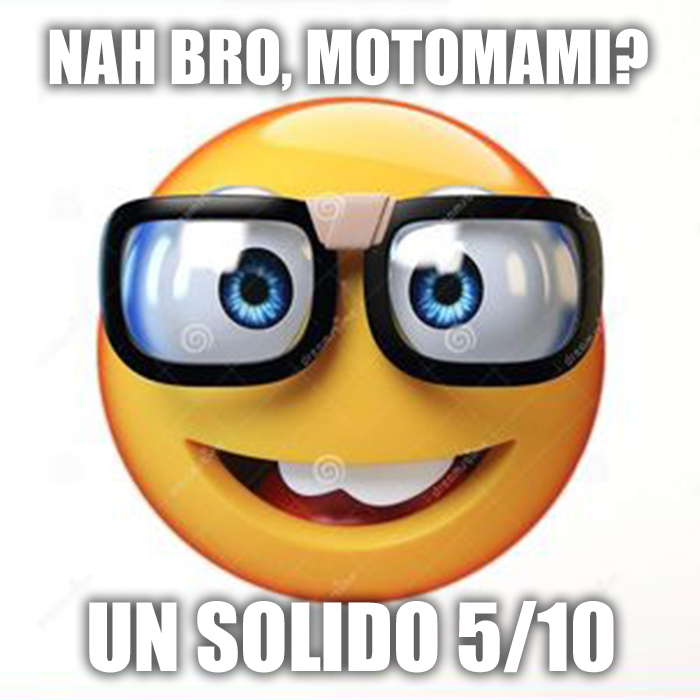
<style>
.page{position:relative;width:700px;height:700px;background:#ffffff}
.page>*{position:absolute;margin:0}
.t1{font:68.5px "Impact";color:#ffffff}
.t2{font:86.7px "Impact";color:#ffffff}
</style>
<div class="page">
<p class="t1" style="left:49px;top:28px;width:599px;height:63px">NAH BRO, MOTOMAMI?</p>
<p class="t2" style="left:89px;top:601px;width:525px;height:72px">UN SOLIDO 5/10</p>
</div>
